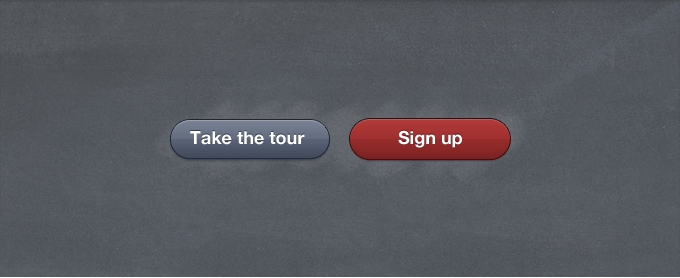
<style>
.page{position:relative;width:680px;height:278px}
.page>*{position:absolute;margin:0}
.t1{font:18px "HelveticaNeue-Bold";color:#ffffff}
</style>
<div class="page">
<p class="t1" style="left:190px;top:131px;width:115px;height:14px">Take the tour</p>
<p class="t1" style="left:398px;top:130px;width:64px;height:18px">Sign up</p>
</div>
